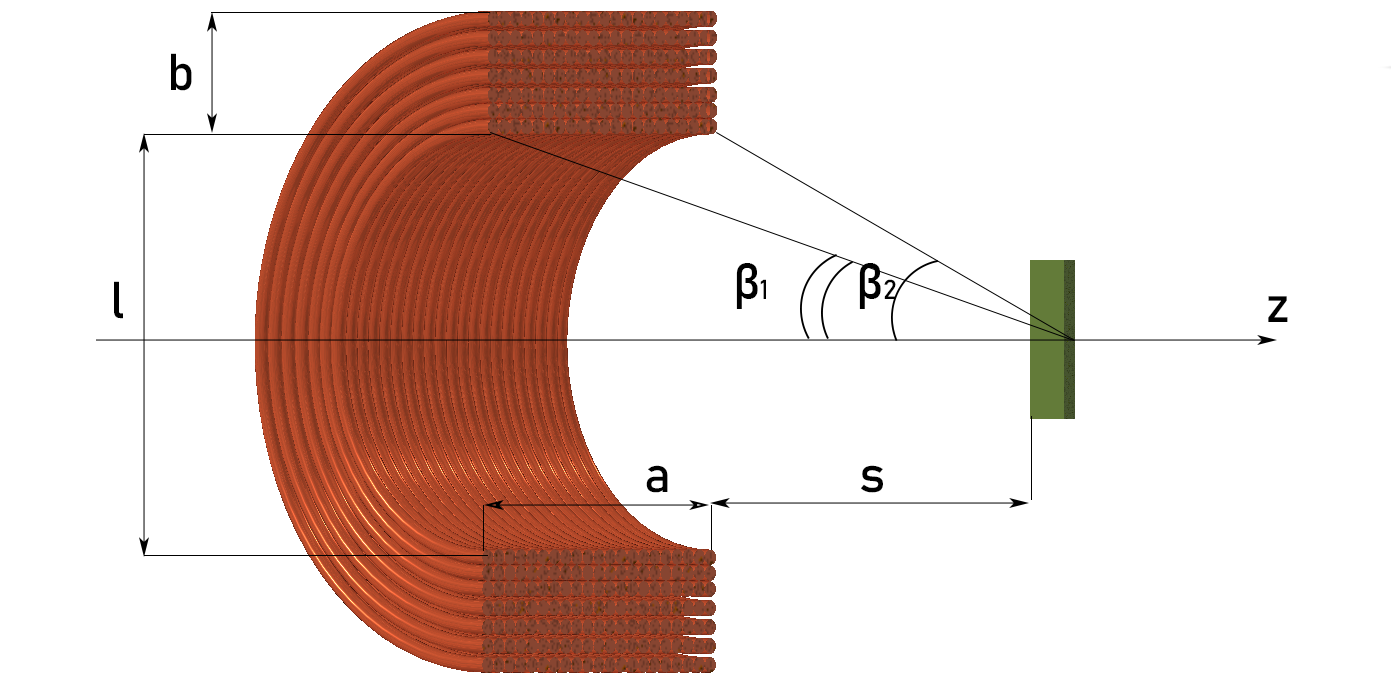
<style>
.page{position:relative;width:1391px;height:688px;background:#ffffff}
.page>*{position:absolute;margin:0}
.t1{font:51px "Bahnschrift";letter-spacing:-0.005em;color:#000000}
.t2{font:50px "Bahnschrift";letter-spacing:-0.005em;color:#000000}
.t3{font:27px "Bahnschrift";letter-spacing:-0.005em;color:#000000}
</style>
<div class="page">
<p class="t1" style="left:171px;top:53px;width:21px;height:38px">b</p>
<p class="t2" style="left:736px;top:263px;width:30px;height:46px">β<span class="t3">1</span></p>
<p class="t2" style="left:859px;top:263px;width:37px;height:46px">β<span class="t3">2</span></p>
<p class="t1" style="left:114px;top:281px;width:9px;height:38px">l</p>
<p class="t1" style="left:1268px;top:296px;width:20px;height:26px">z</p>
<p class="t1" style="left:646px;top:465px;width:22px;height:28px">a</p>
<p class="t1" style="left:861px;top:465px;width:22px;height:28px">s</p>
</div>
